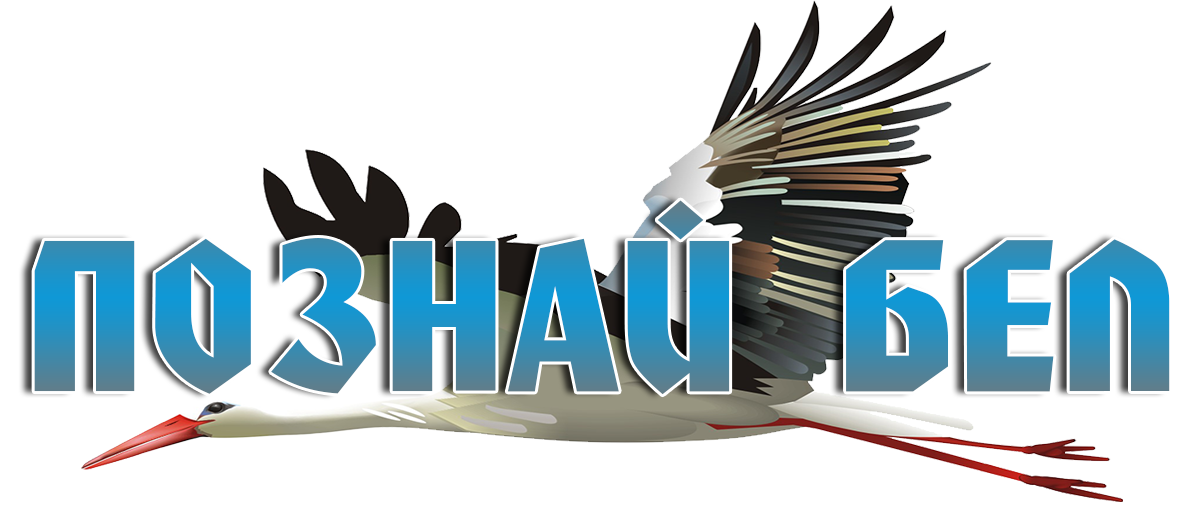
<style>
.page{position:relative;width:1200px;height:530px;background:#ffffff}
.page>*{position:absolute;margin:0}
.t1{font:196.4px "HondaC";scale:1.17 1}
</style>
<div class="page">
<p class="t1" style="left:34px;top:200px;width:1136px;height:195px">ПОЗНАЙ БЕЛ</p>
</div>
